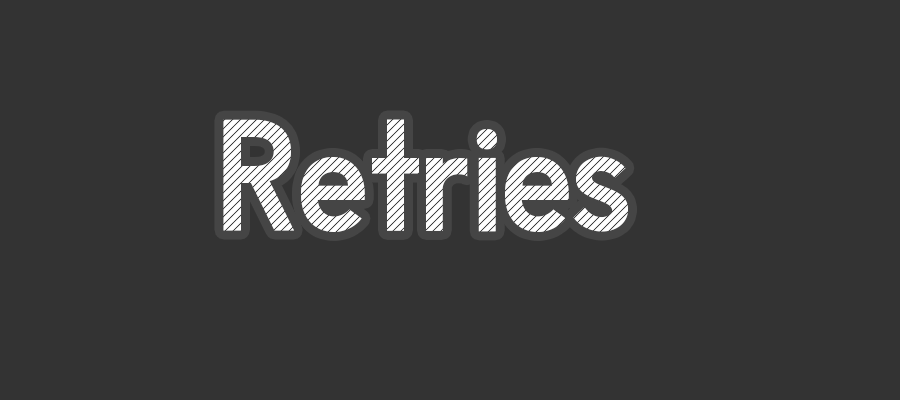
<style>
.page{position:relative;width:900px;height:400px;background:#333333}
.page>*{position:absolute;margin:0}
.t1{font:150px "PlutoniumSans-Regular";color:#ffffff}
</style>
<div class="page">
<p class="t1" style="left:223px;top:119px;width:405px;height:113px">Retries</p>
</div>
